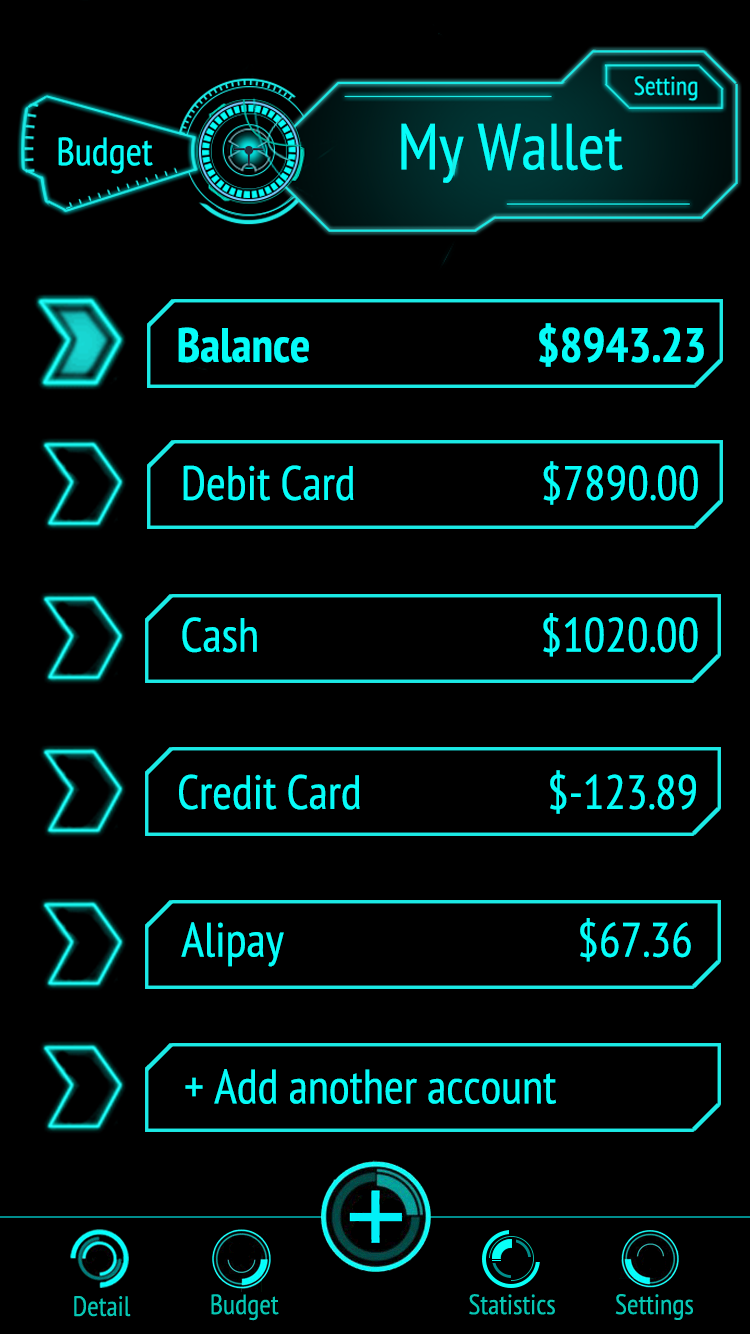
<style>
.page{position:relative;width:750px;height:1334px;background:#000000}
.page>*{position:absolute;margin:0}
.t1{font:65.2px "PTSans-Narrow";color:#06fcf8}
.t2{font:39.1px "PTSans-Narrow";color:#06fcf8}
.t3{font:48px "PTSans-NarrowBold";color:#06fcf8}
.t4{font:48px "PTSans-Narrow";color:#06fcf8}
</style>
<div class="page">
<p class="t1" style="left:401px;top:123px;width:222px;height:60px">My Wallet</p>
<p class="t2" style="left:58px;top:137px;width:95px;height:37px">Budget</p>
<p class="t3" style="left:178px;top:323px;width:526px;height:44px">Balance       $8943.23</p>
<p class="t4" style="left:183px;top:461px;width:515px;height:44px">Debit Card      $7890.00</p>
<p class="t4" style="left:182px;top:613px;width:516px;height:44px">Cash        $1020.00</p>
<p class="t4" style="left:179px;top:770px;width:517px;height:44px">Credit Card      $-123.89</p>
<p class="t4" style="left:181px;top:918px;width:510px;height:49px">Alipay         $67.36</p>
<p class="t4" style="left:185px;top:1069px;width:371px;height:35px">+ Add another account</p>
</div>
